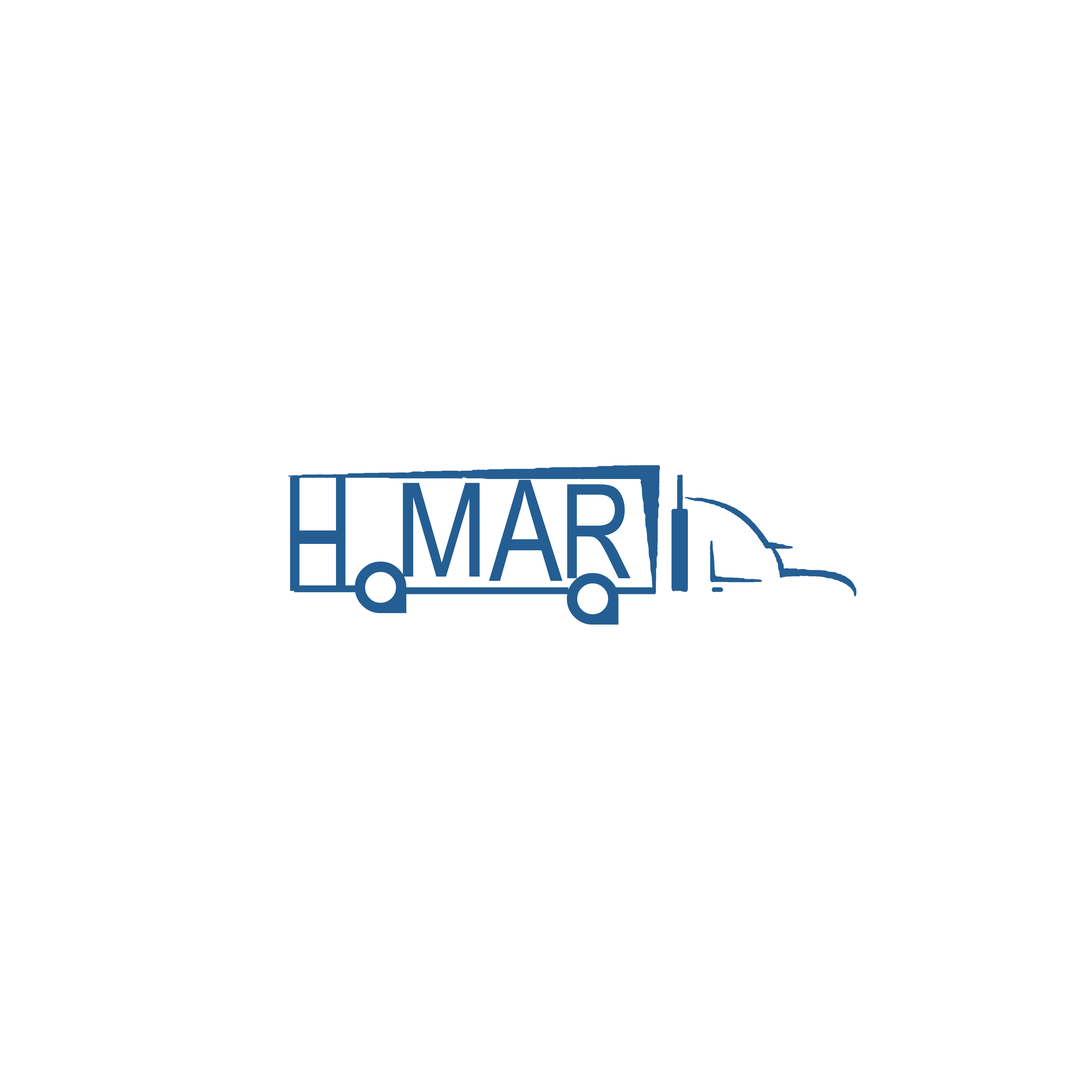
<style>
.page{position:relative;width:1092px;height:1092px;background:#ffffff}
.page>*{position:absolute;margin:0}
.t1{font:159.6px "ArialMT";color:#245e93;scale:0.62 1}
.t2{font:130.6px "ArialMT";color:#245e93;scale:0.86 1}
.t3{font:140.9px "ArialMT";color:#245e93;scale:0.78 1}
.t4{font:131px "ArialMT";color:#245e93;scale:0.77 1}
.t5{font:73.5px "Cerebro";color:#245e93}
</style>
<div class="page">
<p class="t1" style="left:290px;top:477px;width:56px;height:114px;rotate:-180deg">H</p>
<p class="t2" style="left:403px;top:483px;width:77px;height:94px">M</p>
<p class="t3" style="left:489px;top:480px;width:73px;height:101px">A</p>
<p class="t4" style="left:567px;top:484px;width:64px;height:94px">R</p>
<p class="t5" style="left:355px;top:562px;width:52px;height:51px">A</p>
<p class="t5" style="left:567px;top:573px;width:52px;height:52px">A</p>
</div>
